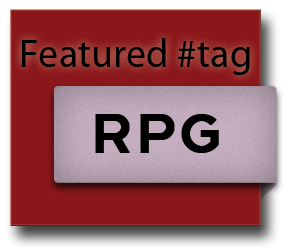
<style>
.page{position:relative;width:300px;height:250px;background:#8a171a}
.page>*{position:absolute;margin:0}
.t1{font:40px "MyriadPro-Regular";color:#000000}
.t2{font:72px "Telegrafico";letter-spacing:-0.06em;color:#000000;font-weight:bold}
.t3{font:72px "Telegrafico";color:#000000;font-weight:bold}
</style>
<div class="page">
<p class="t1" style="left:22px;top:38px;width:228px;height:37px">Featured #tag</p>
<p class="t2" style="left:95px;top:114px;width:124px;height:39px"><span class="t3">R</span>PG</p>
</div>
